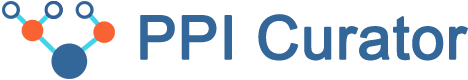
<style>
.page{position:relative;width:468px;height:80px;background:#ffffff}
.page>*{position:absolute;margin:0}
.t1{font:60px "ArialMT";color:#336699;font-weight:bold}
</style>
<div class="page">
<p class="t1" style="left:140px;top:14px;width:328px;height:47px">PPI Curator</p>
</div>
